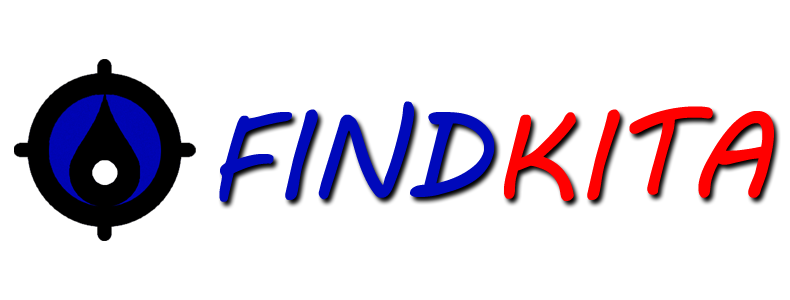
<style>
.page{position:relative;width:790px;height:300px;background:#ffffff}
.page>*{position:absolute;margin:0}
.t1{font:122.2px "MVBoli";color:#0009bb}
.t2{font:122.2px "MVBoli";color:#ff0000}
</style>
<div class="page">
<p class="t1" style="left:219px;top:101px;width:555px;height:101px">FIND<span class="t2">KITA</span></p>
</div>
